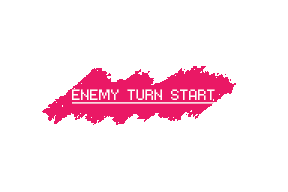
<style>
.page{position:relative;width:288px;height:192px;background:#ffffff}
.page>*{position:absolute;margin:0}
.t1{font:24px "at01";color:#ffffff;text-decoration:underline}
</style>
<div class="page">
<p class="t1" style="left:72px;top:89px;width:145px;height:15px">ENEMY TURN START</p>
</div>
